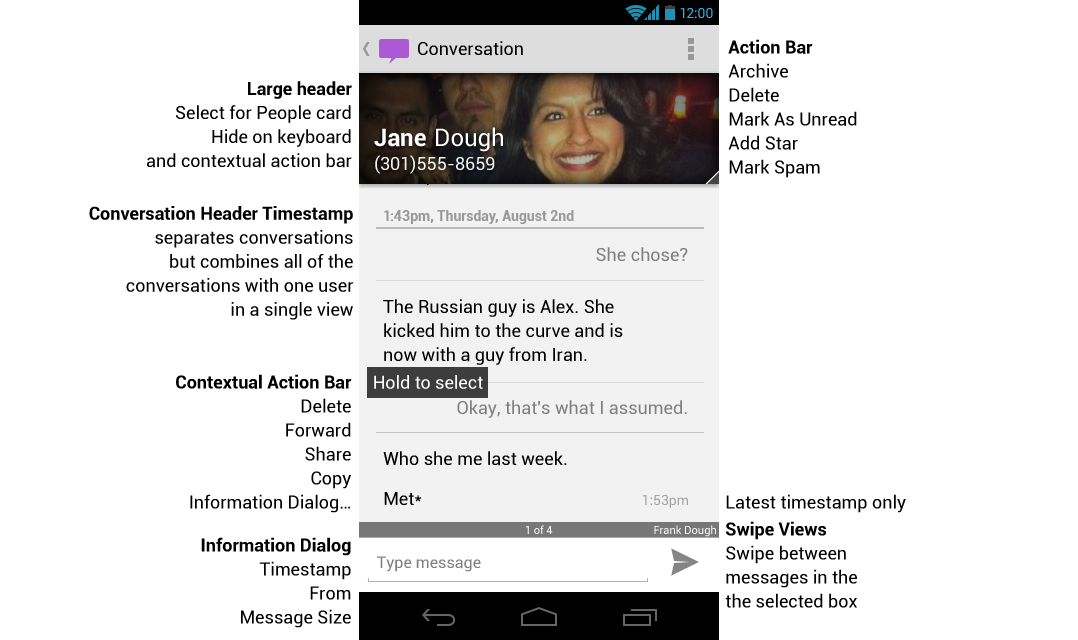
<style>
.page{position:relative;width:1078px;height:640px;background:#ffffff}
.page>*{position:absolute;margin:0}
.t1{font:18px/24px "Roboto-Regular";color:#000000}
.t2{font:18px/24px "Roboto-Bold";color:#000000}
.t3{font:18px "Roboto-Regular";color:#ffffff}
.t4{font:18px "Roboto-Regular";color:#000000}
</style>
<div class="page">
<p class="t1" style="left:728px;top:39px;width:129px;height:139px"><span class="t2">Action Bar<br></span>Archive<br>Delete<br>Mark As Unread<br>Add Star<br>Mark Spam</p>
<p class="t1" style="left:147px;top:81px;width:205px;height:87px;text-align:right"><span class="t2">Large header<br></span>Select for People card<br>Hide on keyboard<br>and contextual action bar</p>
<p class="t1" style="left:89px;top:206px;width:265px;height:114px;text-align:right"><span class="t2">Conversation Header Timestamp<br></span>separates conversations<br>but combines all of the<br>conversations with one user<br>in a single view</p>
<p class="t1" style="left:176px;top:374px;width:176px;height:139px;text-align:right"><span class="t2">Contextual Action Bar<br></span>Delete<br>Forward<br>Share<br>Copy<br>Information Dialog…</p>
<p class="t3" style="left:374px;top:375px;width:109px;height:14px">Hold to select</p>
<p class="t4" style="left:726px;top:494px;width:180px;height:19px">Latest timestamp only</p>
<p class="t1" style="left:725px;top:521px;width:132px;height:87px"><span class="t2">Swipe Views<br></span>Swipe between<br>messages in the <br>the selected box</p>
<p class="t1" style="left:201px;top:537px;width:150px;height:91px;text-align:right"><span class="t2">Information Dialog<br></span>Timestamp<br>From<br>Message Size</p>
</div>
